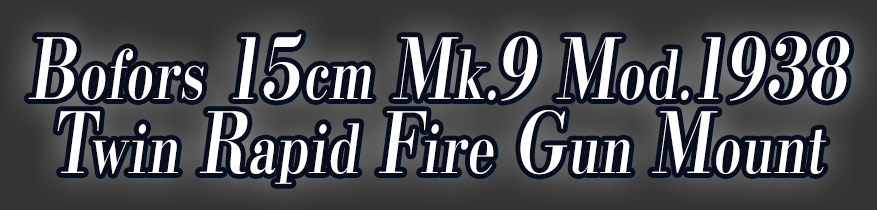
<style>
.page{position:relative;width:877px;height:210px;background:#070d1d}
.page>*{position:absolute;margin:0}
.t1{font:84px/74px "KochoStd-Heavy";letter-spacing:0.03em;color:#ffffff;font-style:italic;scale:0.75 1}
.t2{font:67.2px/74px "KochoStd-Heavy";letter-spacing:0.03em;color:#ffffff;font-style:italic;scale:0.75 1}
</style>
<div class="page">
<p class="t1" style="left:28px;top:34px;width:822px;height:150px;text-align:center">B<span class="t2">ofors </span>15<span class="t2">cm </span>M<span class="t2">k.</span>9 M<span class="t2">od.</span>1938<br>T<span class="t2">win </span>R<span class="t2">apid </span>F<span class="t2">ire </span>G<span class="t2">un </span>M<span class="t2">ount</span></p>
</div>
